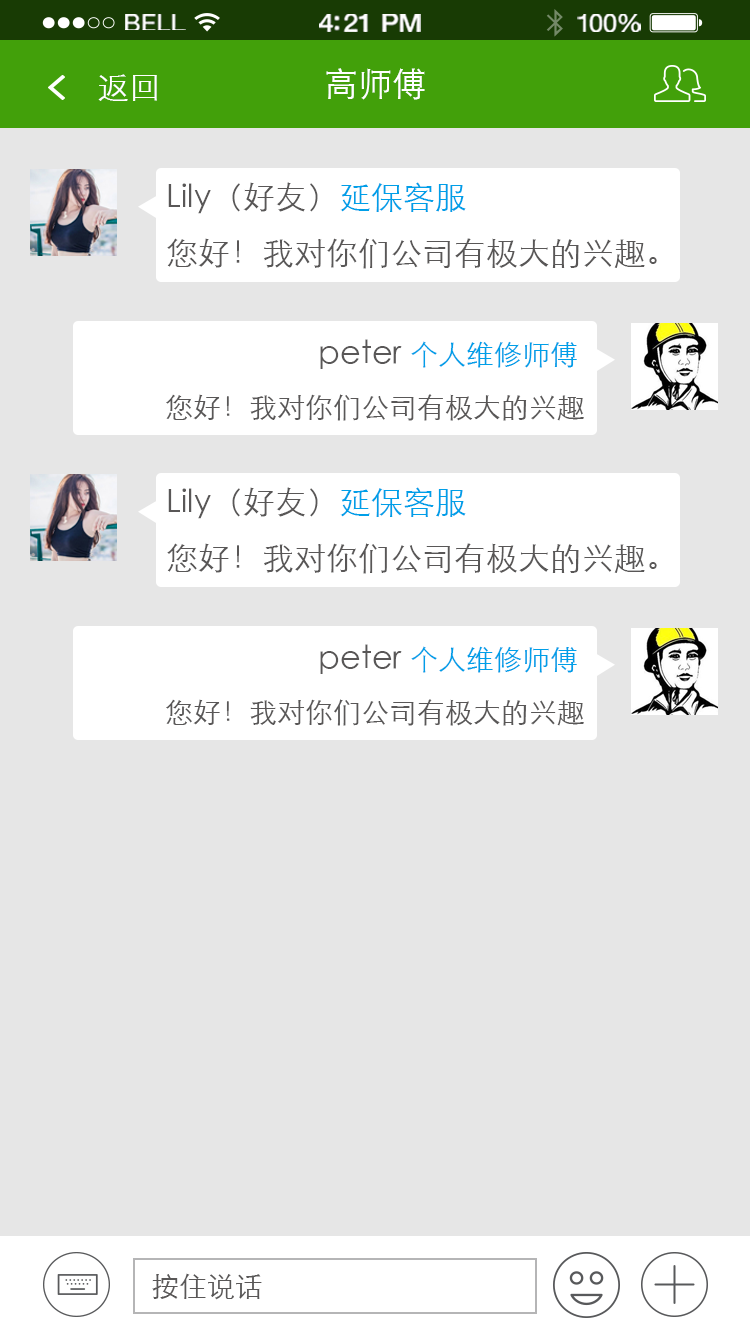
<style>
.page{position:relative;width:750px;height:1334px;background:#e6e6e6}
.page>*{position:absolute;margin:0}
.t1{font:23.3px "HelveticaNeue";letter-spacing:0.02em;color:#ffffff;scale:1.06 1}
.t2{font:25.3px "HelveticaNeue-Medium";letter-spacing:-0.02em;color:#ffffff;scale:1.06 1}
.t3{font:24.3px "HelveticaNeue";letter-spacing:-0.02em;color:#ffffff;scale:1.06 1}
.t4{font:32px "STXihei";color:#ffffff}
.t5{font:34px "STXihei";color:#ffffff}
.t6{font:32px/56px "STXihei";color:#595757}
.t7{font:32px/56px "STXihei";color:#009fe8}
.t8{font:28px/56px "STXihei";color:#595757}
.t9{font:28px/56px "STXihei";color:#009fe8}
.t10{font:28px "STXihei";color:#595757}
</style>
<div class="page">
<p class="t1" style="left:125px;top:14px;width:61px;height:16px">BELL</p>
<p class="t2" style="left:319px;top:14px;width:102px;height:18px">4:21 PM</p>
<p class="t3" style="left:577px;top:14px;width:64px;height:18px">100%</p>
<p class="t4" style="left:98px;top:74px;width:59px;height:27px">返回</p>
<p class="t5" style="left:326px;top:68px;width:99px;height:32px">高师傅</p>
<p class="t6" style="left:167px;top:182px;width:490px;height:87px">Lily（好友）<span class="t7">延保客服 </span>                   <br>您好！我对你们公司有极大的兴趣<span class="t8">。</span></p>
<p class="t8" style="left:166px;top:339px;width:418px;height:82px;text-align:right"><span class="t6">peter </span><span class="t9">个人维修师傅</span> <br>您好！我对你们公司有极大的兴趣</p>
<p class="t6" style="left:167px;top:487px;width:490px;height:87px">Lily（好友）<span class="t7">延保客服 </span>                   <br>您好！我对你们公司有极大的兴趣<span class="t8">。</span></p>
<p class="t8" style="left:166px;top:644px;width:418px;height:82px;text-align:right"><span class="t6">peter </span><span class="t9">个人维修师傅</span> <br>您好！我对你们公司有极大的兴趣</p>
<p class="t10" style="left:152px;top:1273px;width:110px;height:27px">按住说话</p>
</div>
